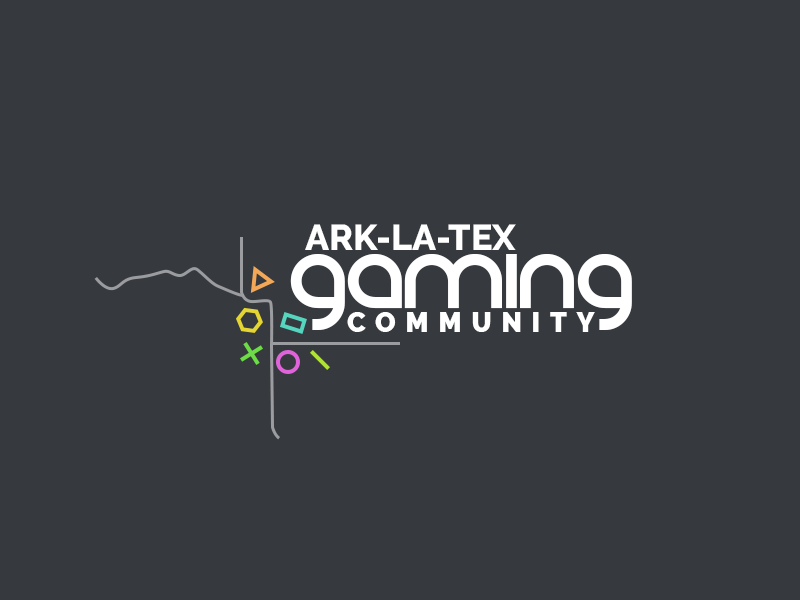
<style>
.page{position:relative;width:800px;height:600px;background:#36393e}
.page>*{position:absolute;margin:0}
.t1{font:36px "Raleway-ExtraBold";color:#ffffff;text-transform:uppercase}
.t2{font:120.4px "REZ";color:#ffffff;text-transform:uppercase}
.t3{font:26.8px "Raleway-Black";letter-spacing:0.2em;color:#ffffff;text-transform:uppercase}
</style>
<div class="page">
<p class="t1" style="left:305px;top:224px;width:211px;height:26px">Ark-La-Tex</p>
<p class="t2" style="left:290px;top:254px;width:342px;height:76px">gaming</p>
<p class="t3" style="left:347px;top:312px;width:248px;height:20px">community</p>
</div>
